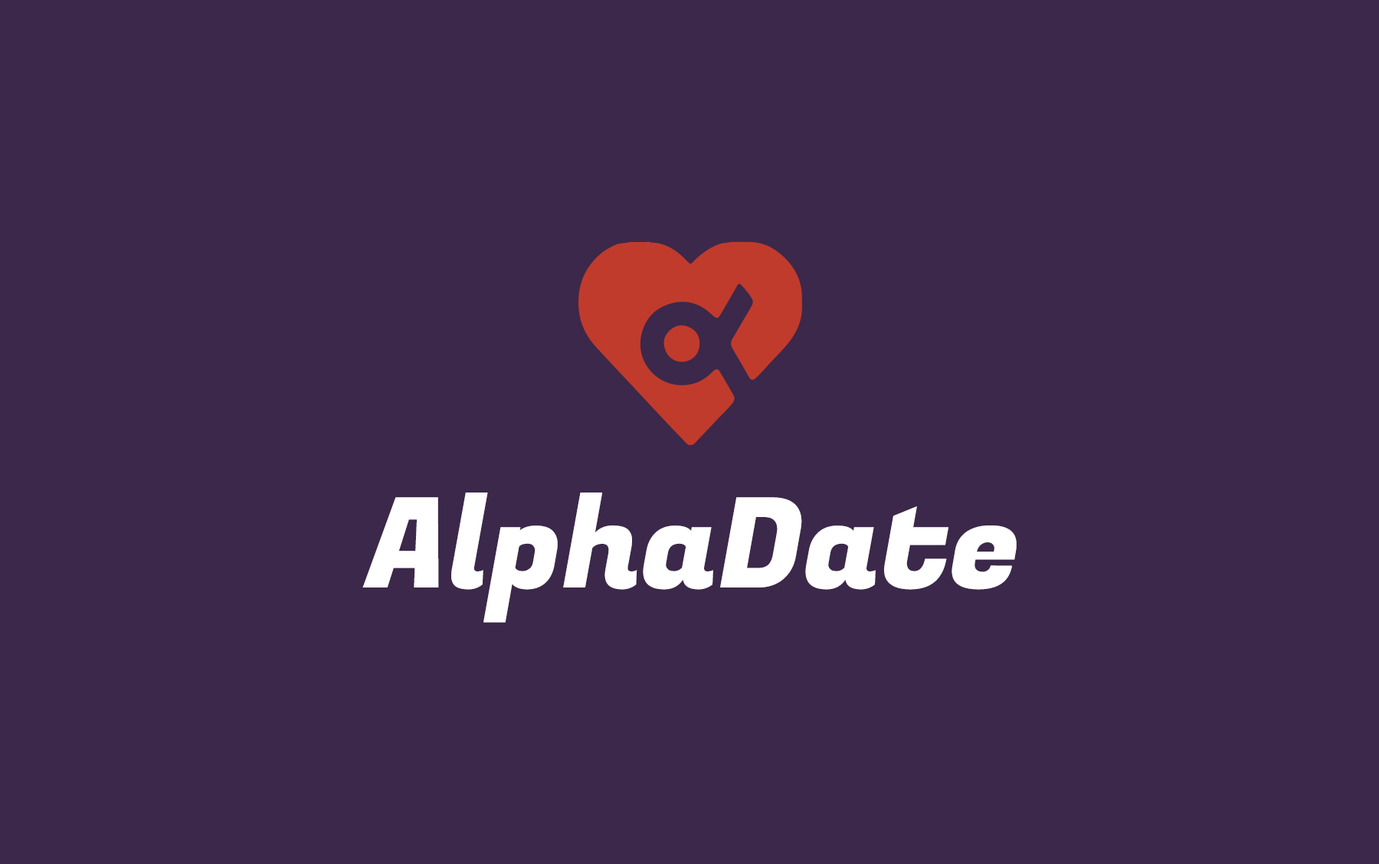
<style>
.page{position:relative;width:1379px;height:864px;background:#3c284a}
.page>*{position:absolute;margin:0}
.t1{font:125.2px "FugazOne-Regular";color:#ffffff}
</style>
<div class="page">
<p class="t1" style="left:362px;top:493px;width:655px;height:130px">AlphaDate</p>
</div>
